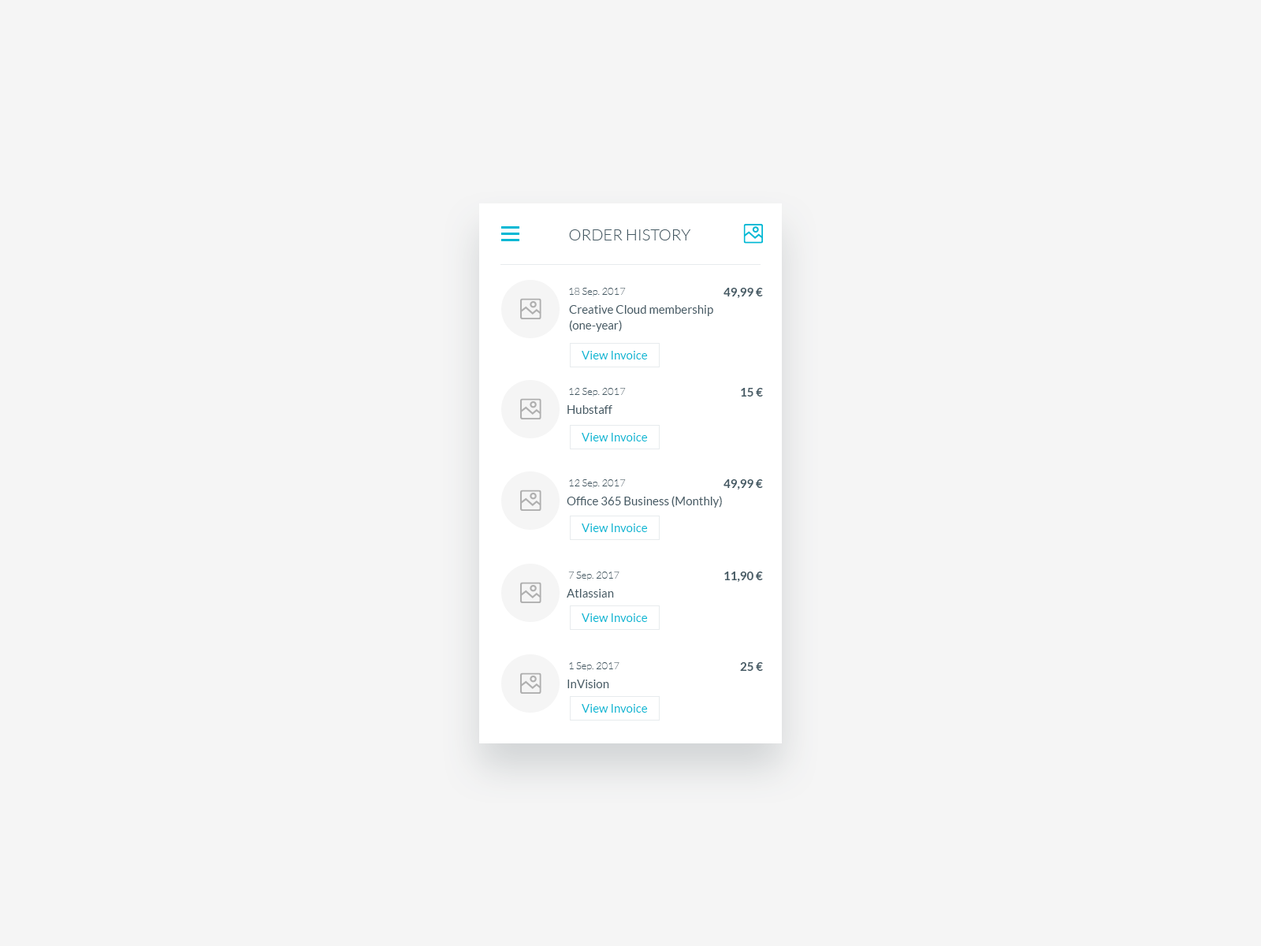
<style>
.page{position:relative;width:1261px;height:946px;background:#f5f5f5}
.page>*{position:absolute;margin:0}
.t1{font:15.8px "Lato-Light";color:#455a64;text-transform:uppercase}
.t2{font:10.2px "Lato-Hairline";color:#455a64}
.t3{font:11.8px "Lato-Bold";color:#455a64}
.t4{font:11.8px/15.8px "Lato-Regular";color:#455a64}
.t5{font:11.8px "Lato-Regular";color:#00b8d4}
.t6{font:11.8px "Lato-Regular";color:#455a64}
</style>
<div class="page">
<p class="t1" style="left:569px;top:229px;width:122px;height:11px">Order History</p>
<p class="t2" style="left:569px;top:288px;width:57px;height:8px">18 Sep. 2017</p>
<p class="t3" style="left:723px;top:288px;width:40px;height:10px">49,99 €</p>
<p class="t4" style="left:569px;top:305px;width:144px;height:27px">Creative Cloud membership<br> (one-year)</p>
<p class="t5" style="left:582px;top:351px;width:66px;height:8px">View Invoice</p>
<p class="t2" style="left:569px;top:388px;width:57px;height:8px">12 Sep. 2017</p>
<p class="t3" style="left:741px;top:388px;width:22px;height:8px">15 €</p>
<p class="t6" style="left:567px;top:405px;width:45px;height:9px">Hubstaff</p>
<p class="t5" style="left:582px;top:433px;width:66px;height:8px">View Invoice</p>
<p class="t2" style="left:569px;top:479px;width:57px;height:9px">12 Sep. 2017</p>
<p class="t3" style="left:723px;top:479px;width:40px;height:10px">49,99 €</p>
<p class="t6" style="left:567px;top:496px;width:155px;height:12px">Office 365 Business (Monthly)</p>
<p class="t5" style="left:582px;top:523px;width:66px;height:9px">View Invoice</p>
<p class="t2" style="left:568px;top:571px;width:51px;height:9px">7 Sep. 2017</p>
<p class="t3" style="left:724px;top:571px;width:39px;height:11px">11,90 €</p>
<p class="t6" style="left:567px;top:589px;width:47px;height:8px">Atlassian</p>
<p class="t5" style="left:582px;top:613px;width:66px;height:9px">View Invoice</p>
<p class="t2" style="left:569px;top:662px;width:50px;height:9px">1 Sep. 2017</p>
<p class="t3" style="left:740px;top:662px;width:23px;height:9px">25 €</p>
<p class="t6" style="left:567px;top:679px;width:42px;height:9px">InVision</p>
<p class="t5" style="left:582px;top:704px;width:66px;height:8px">View Invoice</p>
</div>
